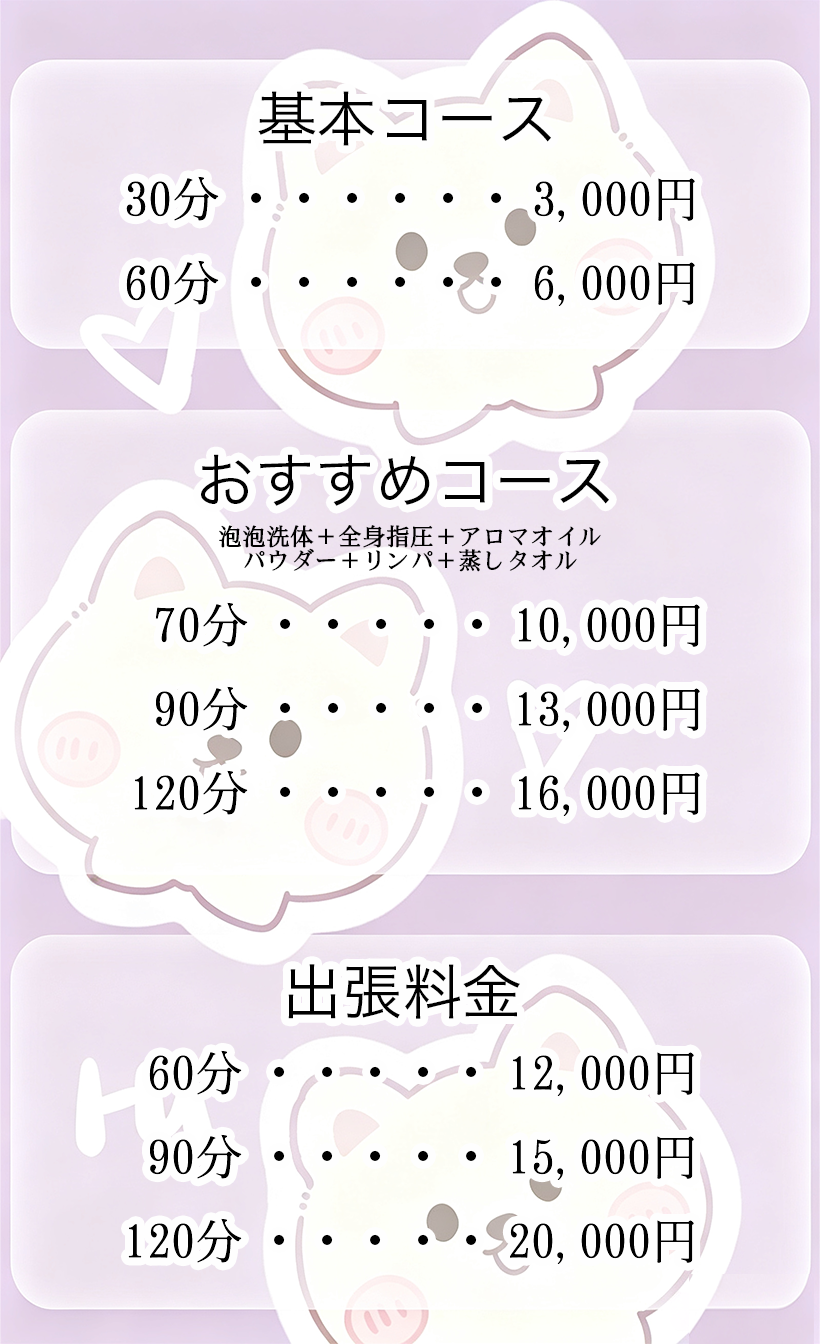
<style>
.page{position:relative;width:820px;height:1344px}
.page>*{position:absolute;margin:0}
.t1{font:60px "HiraKakuPro-W3";color:#000000}
.t2{font:60px "HiraKakuPro-W3";color:#020202}
.t3{font:48px "SimSong-Regular";color:#000000}
.t4{font:48px "KozGoPr6N-Regular";color:#000000}
.t5{font:24px/24px "SimSong-Bold";color:#000000}
</style>
<div class="page">
<p class="t1" style="left:258px;top:91px;width:293px;height:55px"><span class="t2">基本</span>コース</p>
<p class="t3" style="left:126px;top:176px;width:569px;height:130px">30分 <span class="t4">・・・・・・</span> 3,000円<br>60分 <span class="t4">・・・・・・</span> 6,000円</p>
<p class="t1" style="left:201px;top:454px;width:408px;height:52px">おすすめコース</p>
<p class="t5" style="left:219px;top:525px;width:382px;height:47px;text-align:center">泡泡洗体＋全身指圧＋アロマオイル<br>パウダー＋リンパ＋蒸しタオル</p>
<p class="t3" style="left:134px;top:602px;width:566px;height:214px">70分 <span class="t4">・・・・・</span> 10,000円<br> 90分 <span class="t4">・・・・・</span> 13,000円<br>120分 <span class="t4">・・・・・</span> 16,000円</p>
<p class="t1" style="left:288px;top:964px;width:232px;height:55px">出張料金</p>
<p class="t3" style="left:128px;top:1050px;width:566px;height:214px">60分 <span class="t4">・・・・・</span> 12,000円<br> 90分 <span class="t4">・・・・・</span> 15,000円<br>120分 <span class="t4">・・・・・</span> 20,000円</p>
</div>
